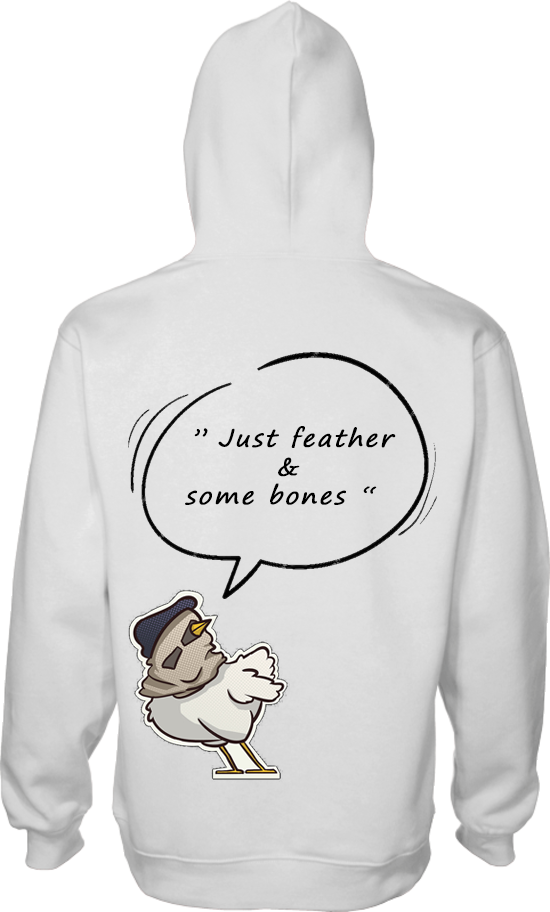
<style>
.page{position:relative;width:550px;height:912px;background:#ffffff}
.page>*{position:absolute;margin:0}
.t1{font:24px "SegoePrint";letter-spacing:0.075em;color:#000000;font-weight:bold;font-style:italic}
</style>
<div class="page">
<p class="t1" style="left:185px;top:426px;width:211px;height:79px;text-align:center">Just feather ” <br>&amp;<br> “ some bones</p>
</div>
